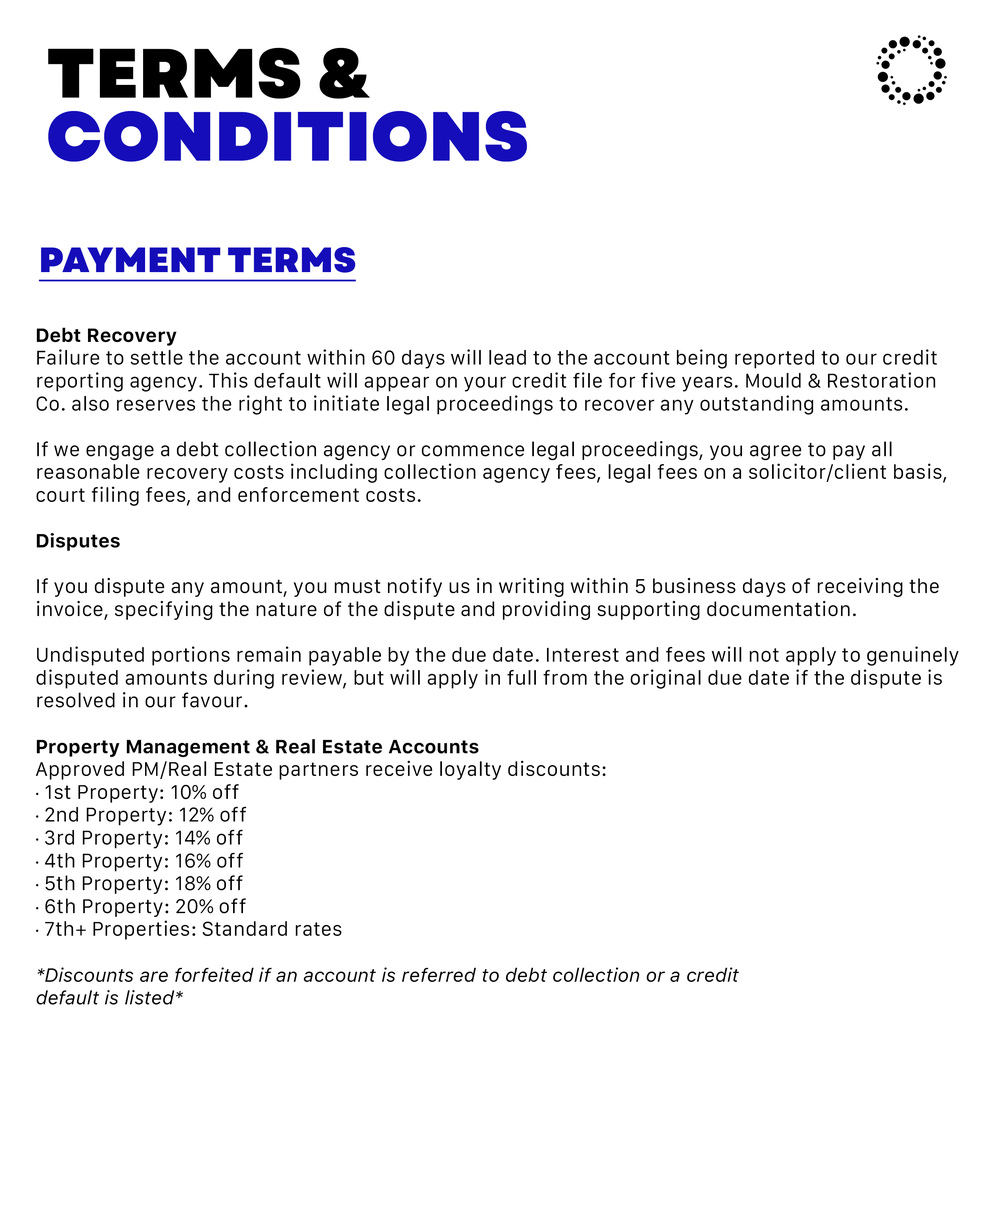
<style>
.page{position:relative;width:983px;height:1213px;background:#ffffff}
.page>*{position:absolute;margin:0}
.t1{font:69.5px/63.1px "Garet-Heavy";letter-spacing:0.005em;color:#150db9}
.t2{font:69.5px/63.1px "Garet-Heavy";letter-spacing:0.005em;color:#000000}
.t3{font:35.1px "Garet-Heavy";letter-spacing:0.005em;color:#150db9;text-decoration:underline}
.t4{font:19px "Galvji";letter-spacing:0.005em;color:#000000}
.t5{font:19px "Galvji-Bold";letter-spacing:0.005em;color:#000000}
.t6{font:19px "MyriadPro-Regular";letter-spacing:0.005em;color:#000000}
.t7{font:19px "Galvji-Oblique";letter-spacing:0.005em;color:#000000}
</style>
<div class="page">
<p class="t1" style="left:48px;top:48px;width:479px;height:114px;text-align:justify"><span class="t2">TERMS &amp;<br></span>CONDITIONS</p>
<p class="t3" style="left:39px;top:247px;width:317px;height:35px">PAYMENT TERMS</p>
<p class="t4" style="left:36px;top:328px;width:923px;height:676px"><span class="t5">Debt Recovery<br></span>Failure to settle the account within 60 days will lead to the account being reported to our credit reporting agency. This default will appear on your credit file for five years. Mould &amp; Restoration Co. also reserves the right to initiate legal proceedings to recover any outstanding amounts.<br><br>If we engage a debt collection agency or commence legal proceedings, you agree to pay all reasonable recovery costs including collection agency fees, legal fees on a solicitor/client basis, court filing fees, and enforcement costs.<br><br><span class="t5">Disputes<br></span><br>If you dispute any amount, you must notify us in writing within 5 business days of receiving the invoice, specifying the nature of the dispute and providing supporting documentation.<br><br>Undisputed portions remain payable by the due date. Interest and fees will not apply to genuinely disputed amounts during review, but will apply in full from the original due date if the dispute is resolved in our favour.<br><br><span class="t5">Property Management &amp; Real Estate Accounts<br></span>Approved PM/Real Estate partners receive loyalty discounts:<br><span class="t6">∙</span> 1st Property: 10% off<br><span class="t6">∙</span> 2nd Property: 12% off<br><span class="t6">∙</span> 3rd Property: 14% off<br><span class="t6">∙</span> 4th Property: 16% off<br><span class="t6">∙</span> 5th Property: 18% off<br><span class="t6">∙</span> 6th Property: 20% off<br><span class="t6">∙</span> 7th+ Properties: Standard rates<br><br><span class="t7">*Discounts are forfeited if an account is referred to debt collection or a credit <br>default is listed*</span></p>
</div>
